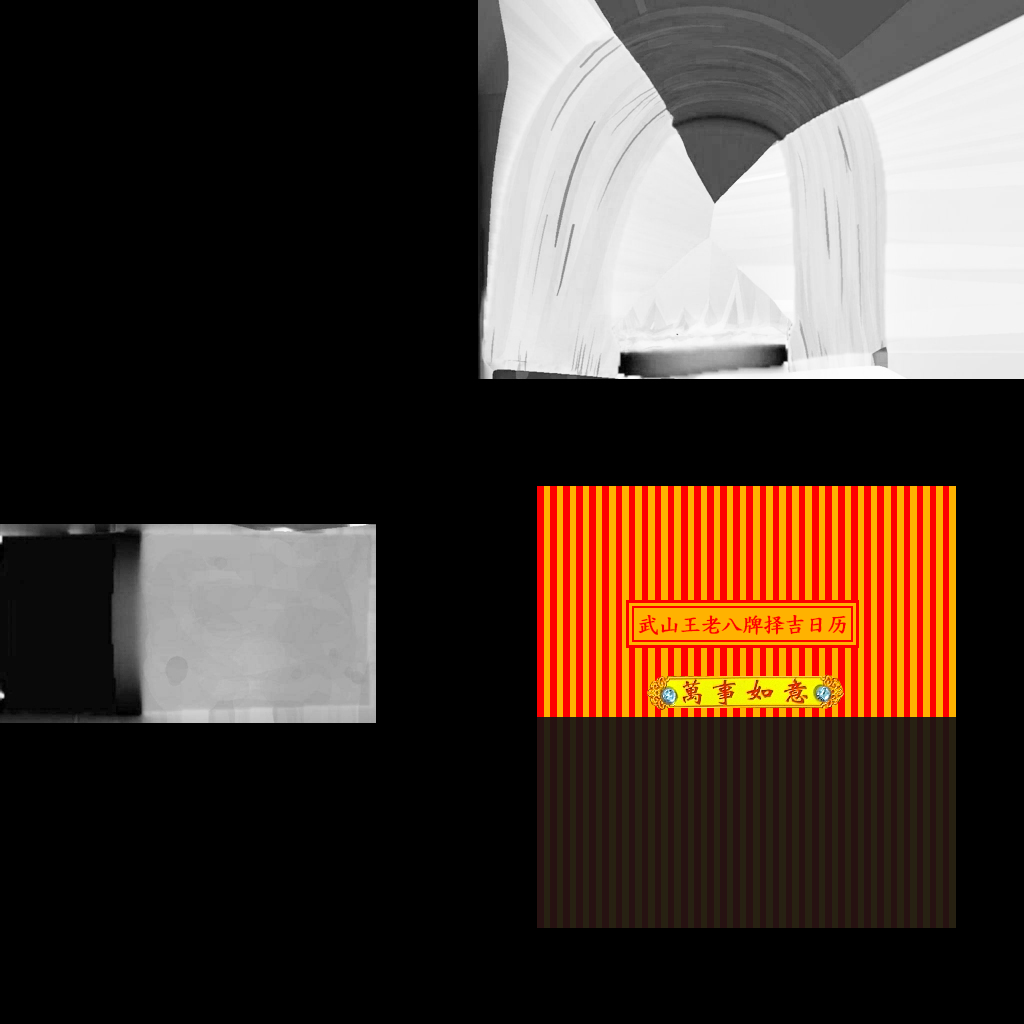
<style>
.page{position:relative;width:1024px;height:1024px;background:#000000}
.page>*{position:absolute;margin:0}
.t1{font:22px "ChillKai";letter-spacing:-0.075em;color:#fe0000;font-weight:bold}
</style>
<div class="page">
<p class="t1" style="left:638px;top:614px;width:208px;height:21px">武山王老八牌择吉日历</p>
</div>
